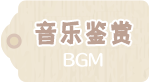
<style>
.page{position:relative;width:149px;height:82px}
.page>*{position:absolute;margin:0}
.t1{font:26.1px "shetumodengxiaofangti";color:#bda193;font-weight:bold;scale:0.94 1}
</style>
<div class="page">
<p class="t1" style="left:35px;top:20px;width:97px;height:25px">音乐鉴赏</p>
</div>
